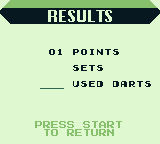
<style>
.page{position:relative;width:160px;height:144px;background:#e0f8cf}
.page>*{position:absolute;margin:0}
.t1{font:16px "Krungthep";color:#e0f8cf}
.t2{font:8px "Early-GameBoy";color:#071821}
.t3{font:8px/8px "Early-GameBoy";color:#071821}
.t4{font:8px/8px "PressStart2P-Regular";color:#86c06c}
</style>
<div class="page">
<p class="t1" style="left:48px;top:10px;width:64px;height:12px">RESULTS</p>
<p class="t2" style="left:49px;top:49px;width:13px;height:6px">01</p>
<p class="t3" style="left:73px;top:49px;width:78px;height:38px">POINTS<br><br>  sets<br><br>  Used  darts</p>
<p class="t4" style="left:35px;top:121px;width:87px;height:15px;text-align:center">PRESS START<br>TO RETURN</p>
</div>
